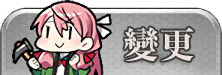
<style>
.page{position:relative;width:222px;height:75px}
.page>*{position:absolute;margin:0}
.t1{font:36px "RyuminPr6N-ExBold";color:#ede3de}
</style>
<div class="page">
<p class="t1" style="left:124px;top:27px;width:70px;height:35px">變更</p>
</div>
